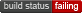
<style>
.page{position:relative;width:82px;height:13px}
.page>*{position:absolute;margin:0}
.t1{font:10px "ArialMT";color:#cccccc;scale:0.9 1}
.t2{font:10px "ArialMT";color:#ffffff;scale:0.9 1}
</style>
<div class="page">
<p class="t1" style="left:4px;top:2px;width:46px;height:7px">build status</p>
<p class="t2" style="left:55px;top:2px;width:23px;height:9px">failing</p>
</div>
